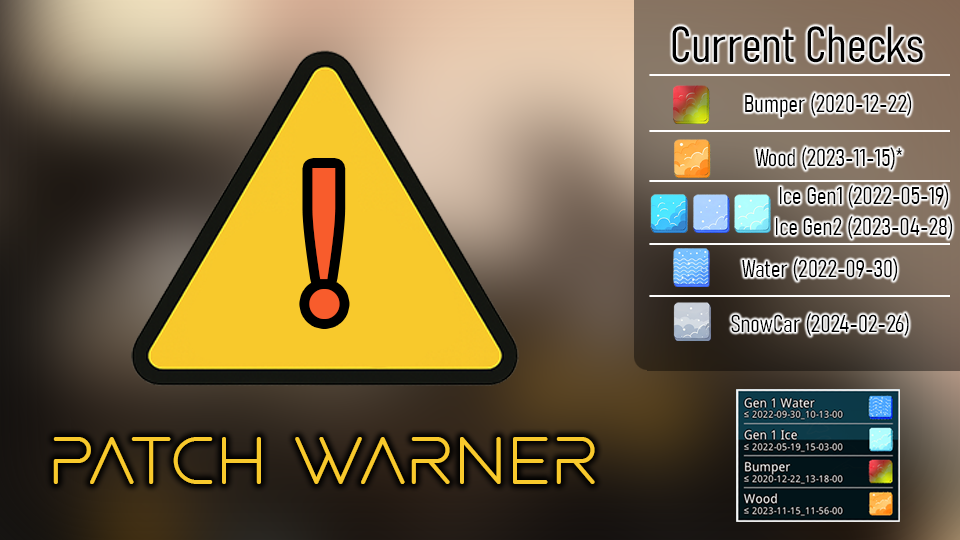
<style>
.page{position:relative;width:960px;height:540px}
.page>*{position:absolute;margin:0}
.t1{font:50px "Bahnschrift-LightCondensed";color:#000000}
.t2{font:24px "Bahnschrift-LightCondensed";color:#000000}
.t3{font:205.3px "TrebuchetMS";color:#f85c2c}
.t4{font:67.4px "AlteredCarbonV2";color:#f8c92c}
</style>
<div class="page">
<p class="t1" style="left:672px;top:26px;width:251px;height:37px">Current Checks</p>
<p class="t2" style="left:745px;top:93px;width:167px;height:24px">Bumper (2020-12-22)</p>
<p class="t2" style="left:755px;top:147px;width:148px;height:23px">Wood (2023-11-15)*</p>
<p class="t3" style="left:309px;top:168px;width:31px;height:151px">!</p>
<p class="t2" style="left:780px;top:185px;width:169px;height:23px">Ice Gen1 (2022-05-19)</p>
<p class="t2" style="left:776px;top:216px;width:177px;height:23px">Ice Gen2 (2023-04-28)</p>
<p class="t2" style="left:742px;top:258px;width:156px;height:23px">Water (2022-09-30)</p>
<p class="t2" style="left:731px;top:313px;width:178px;height:23px">SnowCar (2024-02-26)</p>
<p class="t4" style="left:53px;top:437px;width:542px;height:47px">Patch Warner</p>
</div>
